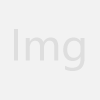
<style>
.page{position:relative;width:100px;height:100px;background:#f2f2f2}
.page>*{position:absolute;margin:0}
.t1{font:41.7px "MicrosoftYaHei";color:#dedede}
</style>
<div class="page">
<p class="t1" style="left:14px;top:29px;width:71px;height:42px">Img</p>
</div>
